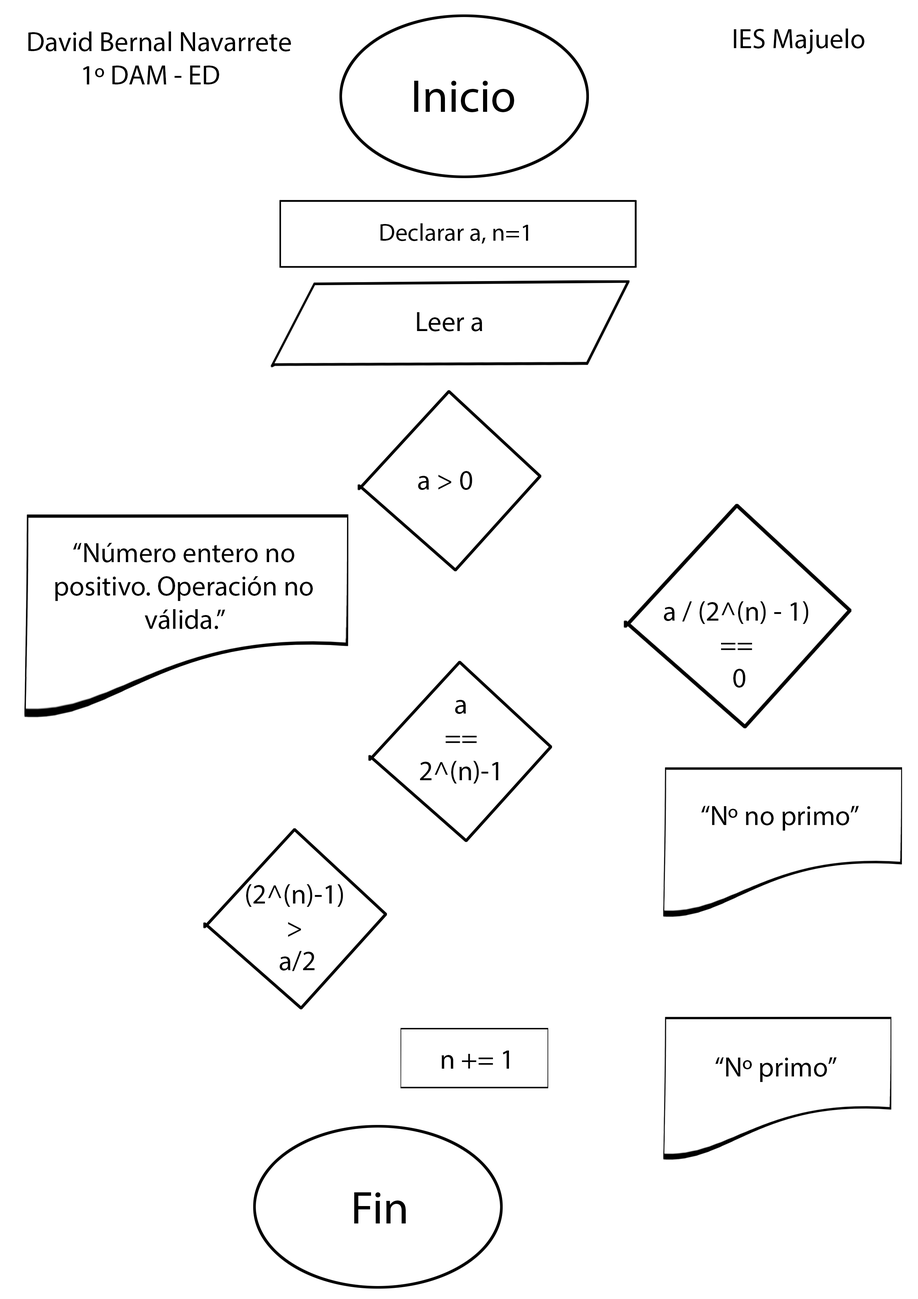
<style>
.page{position:relative;width:918px;height:1299px;background:#ffffff}
.page>*{position:absolute;margin:0}
.t1{font:27.8px "MyriadPro-Regular";color:#000000}
.t2{font:46.3px "MyriadPro-Regular";color:#000000}
.t3{font:24.7px "MyriadPro-Regular";color:#000000}
</style>
<div class="page">
<p class="t1" style="left:734px;top:29px;width:130px;height:25px">IES Majuelo</p>
<p class="t1" style="left:28px;top:31px;width:263px;height:53px;text-align:center">David Bernal Navarrete<br>1º DAM - ED</p>
<p class="t2" style="left:414px;top:80px;width:100px;height:32px">Inicio</p>
<p class="t3" style="left:381px;top:223px;width:147px;height:21px">Declarar a, n=1</p>
<p class="t1" style="left:417px;top:312px;width:65px;height:19px">Leer a</p>
<p class="t1" style="left:418px;top:471px;width:54px;height:19px">a &gt; 0</p>
<p class="t1" style="left:55px;top:543px;width:258px;height:86px;text-align:center">“Número entero no<br>positivo. Operación no<br>válida.”</p>
<p class="t1" style="left:664px;top:601px;width:145px;height:87px;text-align:center">a / (2^(n) - 1) <br>== <br>0</p>
<p class="t1" style="left:420px;top:700px;width:78px;height:83px;text-align:center">a<br>==<br>2^(n)-1</p>
<p class="t1" style="left:701px;top:806px;width:158px;height:24px">“Nº no primo”</p>
<p class="t1" style="left:246px;top:884px;width:97px;height:87px;text-align:center">(2^(n)-1)<br>&gt;<br> a/2</p>
<p class="t1" style="left:442px;top:1050px;width:67px;height:18px">n += 1</p>
<p class="t1" style="left:715px;top:1057px;width:122px;height:25px">“Nº primo”</p>
<p class="t2" style="left:354px;top:1192px;width:52px;height:31px">Fin</p>
</div>
